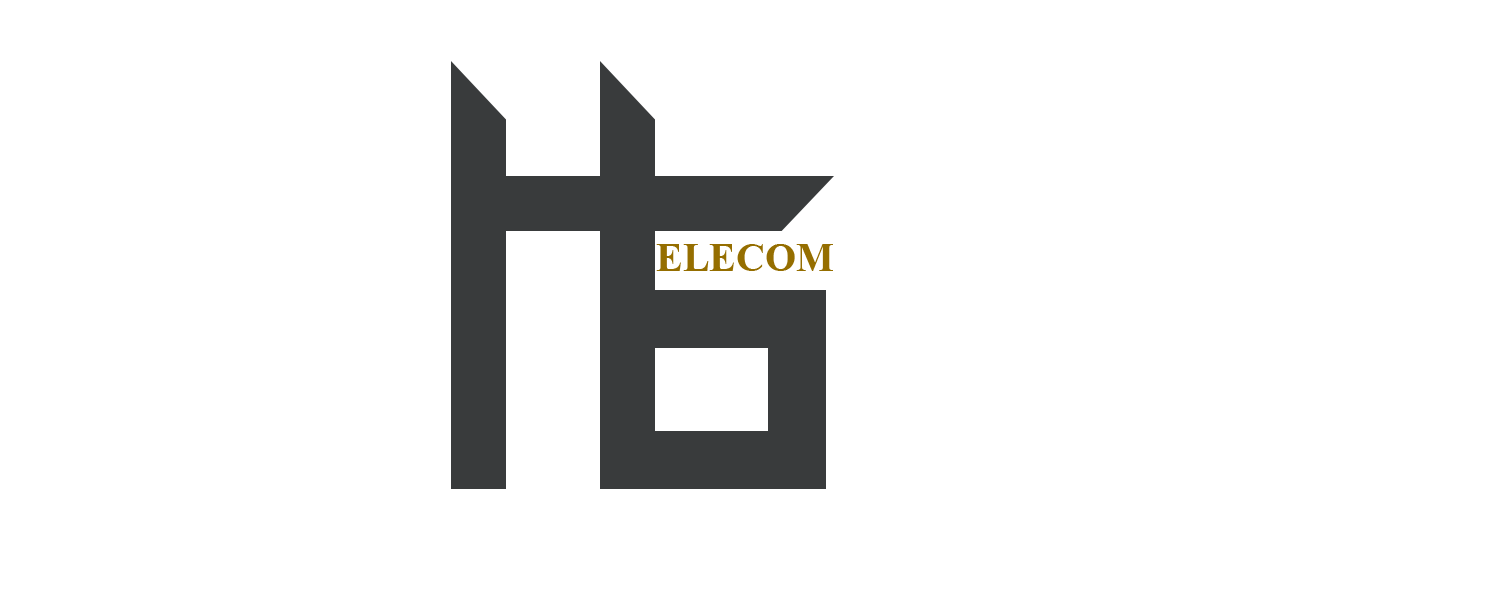
<style>
.page{position:relative;width:1500px;height:600px;background:#ffffff}
.page>*{position:absolute;margin:0}
.t1{font:40px "TimesNewRomanPS-BoldMT";color:#956e00}
</style>
<div class="page">
<p class="t1" style="left:656px;top:244px;width:177px;height:27px">ELECOM</p>
</div>
